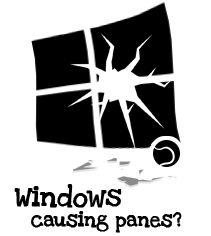
<style>
.page{position:relative;width:211px;height:236px;background:#ffffff}
.page>*{position:absolute;margin:0}
.t1{font:21px "LoveYaLikeASisterSolid";color:#000000;font-weight:bold}
.t2{font:15px "LoveYaLikeASisterSolid";color:#000000;font-weight:bold}
</style>
<div class="page">
<p class="t1" style="left:14px;top:184px;width:108px;height:24px">Windows</p>
<p class="t2" style="left:31px;top:211px;width:151px;height:22px">causing panes?</p>
</div>
